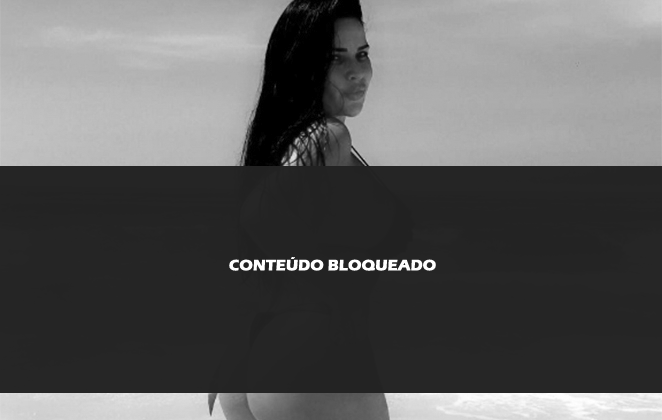
<style>
.page{position:relative;width:662px;height:420px;background:#252525}
.page>*{position:absolute;margin:0}
.t1{font:15.6px "ErasITC-Bold";color:#ffffff}
</style>
<div class="page">
<p class="t1" style="left:229px;top:257px;width:207px;height:14px">CONTEÚDO BLOQUEADO</p>
</div>
